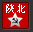
<style>
.page{position:relative;width:33px;height:32px;background:#c50000}
.page>*{position:absolute;margin:0}
.t1{font:10.4px "SimSun";color:#ffffff}
</style>
<div class="page">
<p class="t1" style="left:6px;top:4px;width:19px;height:9px">陕北</p>
</div>
